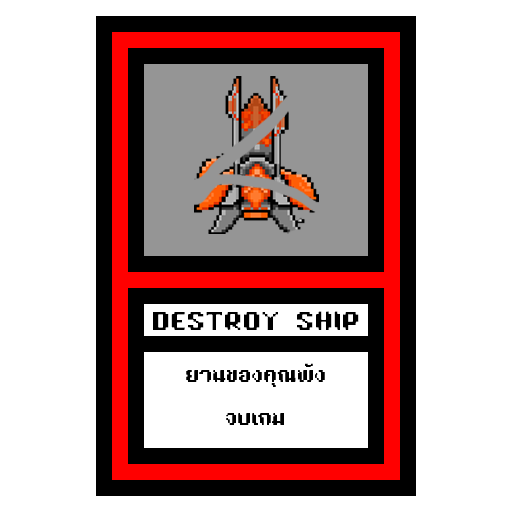
<style>
.page{position:relative;width:512px;height:512px;background:#ffffff}
.page>*{position:absolute;margin:0}
.t1{font:24px "TA16BIT-Regular";color:#000000}
.t2{font:18px "TA16BIT-Regular";color:#000000}
</style>
<div class="page">
<p class="t1" style="left:153px;top:311px;width:206px;height:19px">DESTROY SHIP</p>
<p class="t2" style="left:186px;top:363px;width:139px;height:62px;text-align:center">ยานของคุณพัง<br><br>จบเกม</p>
</div>
